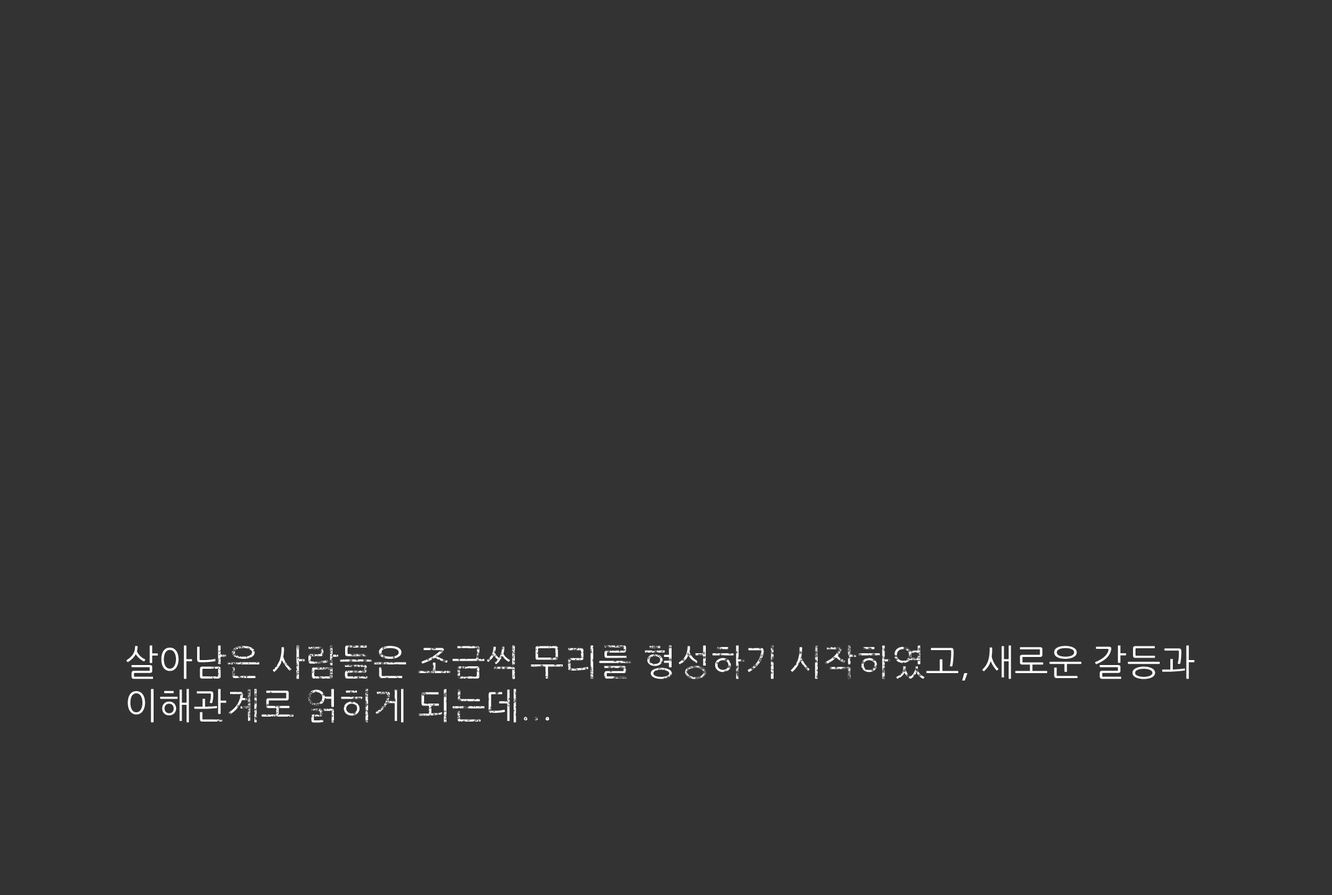
<style>
.page{position:relative;width:1332px;height:895px;background:#333333}
.page>*{position:absolute;margin:0}
.t1{font:36.3px "NanumGothic";color:#ffffff}
</style>
<div class="page">
<p class="t1" style="left:126px;top:645px;width:1068px;height:78px">살아남은 사람들은 조금씩 무리를 형성하기 시작하였고, 새로운 갈등과 이해관계로 얽히게 되는데...</p>
</div>
